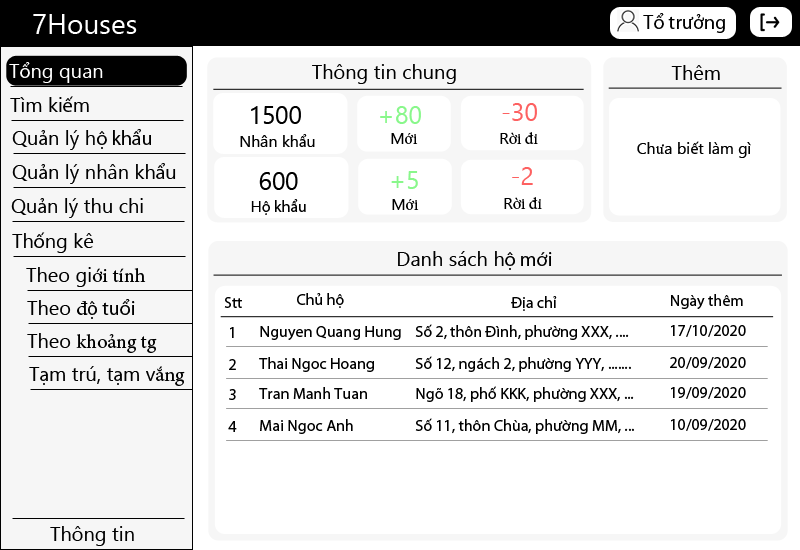
<style>
.page{position:relative;width:800px;height:550px;background:#ffffff}
.page>*{position:absolute;margin:0}
.t1{font:28px "SegoeUIHistoric";color:#ffffff}
.t2{font:20px "MyriadPro-Regular";color:#000000}
.t3{font:20px "SegoeUIHistoric";color:#000000}
.t4{font:20px "SegoeUIHistoric";color:#ffffff}
.t5{font:20px "MyriadPro-Regular";color:#ffffff}
.t6{font:25px "SegoeUIHistoric";color:#000000}
.t7{font:25px "SegoeUIHistoric";color:#89f78b}
.t8{font:25px "SegoeUIHistoric";color:#fd6161}
.t9{font:16px "SegoeUIHistoric";color:#000000}
.t10{font:16px "MyriadPro-Regular";color:#000000}
.t11{font:16px "MinionPro-Regular";color:#000000}
.t12{font:20px "MinionPro-Regular";color:#000000}
</style>
<div class="page">
<p class="t1" style="left:33px;top:14px;width:104px;height:20px">7Houses</p>
<p class="t2" style="left:643px;top:13px;width:82px;height:20px"><span class="t3">T</span>ổ trưởng</p>
<p class="t4" style="left:9px;top:62px;width:94px;height:21px">T<span class="t5">ổ</span>ng quan</p>
<p class="t3" style="left:312px;top:64px;width:144px;height:20px">Thông tin chung</p>
<p class="t3" style="left:671px;top:65px;width:49px;height:15px">Thêm</p>
<p class="t3" style="left:10px;top:96px;width:79px;height:16px">Tìm ki<span class="t2">ế</span>m</p>
<p class="t6" style="left:251px;top:106px;width:50px;height:18px">1500</p>
<p class="t7" style="left:380px;top:106px;width:41px;height:18px">+80</p>
<p class="t8" style="left:502px;top:103px;width:35px;height:18px">-30</p>
<p class="t3" style="left:12px;top:129px;width:139px;height:21px">Qu<span class="t2">ả</span>n lý h<span class="t2">ộ khẩu</span></p>
<p class="t9" style="left:240px;top:134px;width:75px;height:13px">Nhân kh<span class="t10">ẩ</span>u</p>
<p class="t11" style="left:391px;top:133px;width:27px;height:11px"><span class="t9">M</span>ới</p>
<p class="t11" style="left:500px;top:132px;width:38px;height:12px"><span class="t9">R</span>ời đi</p>
<p class="t9" style="left:637px;top:141px;width:114px;height:17px">Ch<span class="t11">ư</span>a bi<span class="t10">ế</span>t làm gì</p>
<p class="t3" style="left:12px;top:163px;width:164px;height:21px">Qu<span class="t2">ả</span>n lý nhân kh<span class="t2">ẩ</span>u</p>
<p class="t6" style="left:259px;top:172px;width:39px;height:18px">600</p>
<p class="t7" style="left:391px;top:171px;width:27px;height:18px">+5</p>
<p class="t8" style="left:512px;top:167px;width:21px;height:18px">-2</p>
<p class="t3" style="left:11px;top:198px;width:132px;height:20px">Qu<span class="t2">ả</span>n lý thu chi</p>
<p class="t11" style="left:504px;top:197px;width:38px;height:12px"><span class="t9">R</span>ời đi</p>
<p class="t10" style="left:251px;top:199px;width:55px;height:16px"><span class="t9">H</span>ộ khẩu</p>
<p class="t11" style="left:392px;top:199px;width:27px;height:11px"><span class="t9">M</span>ới</p>
<p class="t3" style="left:12px;top:232px;width:82px;height:21px">Th<span class="t2">ố</span>ng kê</p>
<p class="t3" style="left:398px;top:251px;width:154px;height:19px">Danh sách h<span class="t2">ộ mới</span></p>
<p class="t3" style="left:26px;top:267px;width:120px;height:20px">Theo gi<span class="t12">ới tính</span></p>
<p class="t10" style="left:297px;top:293px;width:47px;height:15px">Chủ hộ</p>
<p class="t10" style="left:671px;top:294px;width:72px;height:15px">Ngày thêm</p>
<p class="t2" style="left:27px;top:299px;width:108px;height:20px"><span class="t3">Theo </span><span class="t12">đ</span>ộ tuổi</p>
<p class="t10" style="left:224px;top:297px;width:18px;height:11px">Stt</p>
<p class="t10" style="left:511px;top:296px;width:46px;height:15px">Địa chỉ</p>
<p class="t10" style="left:230px;top:327px;width:4px;height:11px">1</p>
<p class="t10" style="left:260px;top:326px;width:141px;height:14px">Nguyen Quang Hung</p>
<p class="t10" style="left:415px;top:324px;width:214px;height:16px">Số 2, thôn Đình, phường XXX, ....</p>
<p class="t10" style="left:671px;top:325px;width:75px;height:12px">17/10/2020</p>
<p class="t12" style="left:27px;top:333px;width:130px;height:20px"><span class="t3">Theo </span>khoảng tg</p>
<p class="t3" style="left:29px;top:366px;width:156px;height:20px">T<span class="t2">ạ</span>m trú, t<span class="t2">ạ</span>m v<span class="t12">ắng</span></p>
<p class="t10" style="left:229px;top:359px;width:7px;height:11px">2</p>
<p class="t10" style="left:259px;top:357px;width:115px;height:15px">Thai Ngoc Hoang</p>
<p class="t10" style="left:415px;top:356px;width:216px;height:16px">Số 12, ngách 2, phường YYY, .......</p>
<p class="t10" style="left:670px;top:357px;width:76px;height:12px">20/09/2020</p>
<p class="t10" style="left:229px;top:389px;width:7px;height:11px">3</p>
<p class="t10" style="left:259px;top:387px;width:108px;height:12px">Tran Manh Tuan</p>
<p class="t10" style="left:416px;top:386px;width:218px;height:16px">Ngõ 18, phố KKK, phường XXX, ...</p>
<p class="t10" style="left:671px;top:387px;width:75px;height:12px">19/09/2020</p>
<p class="t10" style="left:228px;top:421px;width:9px;height:11px">4</p>
<p class="t10" style="left:260px;top:419px;width:93px;height:15px">Mai Ngoc Anh</p>
<p class="t10" style="left:415px;top:418px;width:219px;height:16px">Số 11, thôn Chùa, phường MM, ...</p>
<p class="t10" style="left:671px;top:419px;width:75px;height:12px">10/09/2020</p>
<p class="t3" style="left:50px;top:526px;width:84px;height:20px">Thông tin</p>
</div>
